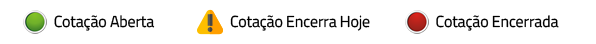
<style>
.page{position:relative;width:596px;height:44px;background:#ffffff}
.page>*{position:absolute;margin:0}
.t1{font:16px "TitilliumWeb-Regular";letter-spacing:-0.01em;color:#000000}
</style>
<div class="page">
<p class="t1" style="left:54px;top:15px;width:101px;height:16px">Cotação Aberta</p>
<p class="t1" style="left:230px;top:15px;width:140px;height:16px">Cotação Encerra Hoje</p>
<p class="t1" style="left:436px;top:15px;width:123px;height:16px">Cotação Encerrada</p>
</div>
